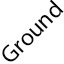
<style>
.page{position:relative;width:64px;height:64px;background:#ffffff}
.page>*{position:absolute;margin:0}
.t1{font:24px "MyriadPro-Regular";color:#050505}
</style>
<div class="page">
<p class="t1" style="left:2px;top:0px;width:62px;height:62px;rotate:-45deg">Ground</p>
</div>
